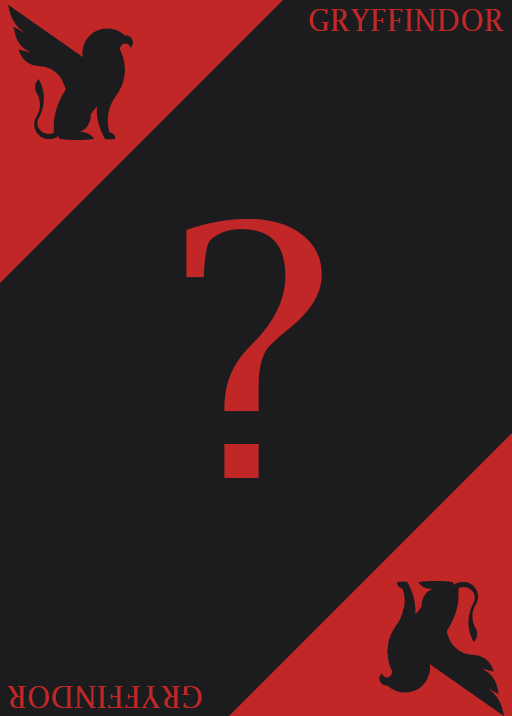
<style>
.page{position:relative;width:512px;height:716px;background:#1c1c1e}
.page>*{position:absolute;margin:0}
.t1{font:30px "LucidaFax";color:#c22727}
.t2{font:350px "LucidaBright";color:#c22727}
</style>
<div class="page">
<p class="t1" style="left:309px;top:9px;width:195px;height:22px">GRYFFINDOR</p>
<p class="t2" style="left:186px;top:219px;width:136px;height:259px">?</p>
<p class="t1" style="left:7px;top:686px;width:195px;height:22px;rotate:180deg">GRYFFINDOR</p>
</div>
